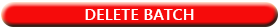
<style>
.page{position:relative;width:280px;height:28px;background:#f60b0b}
.page>*{position:absolute;margin:0}
.t1{font:16.4px "YuGothicUI-Bold";color:#ffffff}
</style>
<div class="page">
<p class="t1" style="left:85px;top:9px;width:109px;height:11px">DELETE BATCH</p>
</div>
